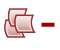
<style>
.page{position:relative;width:60px;height:50px;background:#ffffff}
.page>*{position:absolute;margin:0}
.t1{font:48px "ArialMT";color:#990000}
</style>
<div class="page">
<p class="t1" style="left:41px;top:22px;width:14px;height:5px">-</p>
</div>
